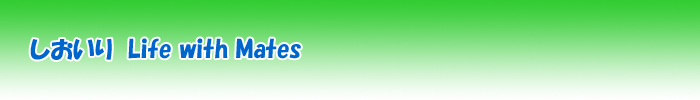
<style>
.page{position:relative;width:700px;height:100px}
.page>*{position:absolute;margin:0}
.t1{font:24px "HGPSoeiKakupoptai";color:#0066cc}
</style>
<div class="page">
<p class="t1" style="left:30px;top:38px;width:271px;height:22px">しおいり  Life with Mates</p>
</div>
